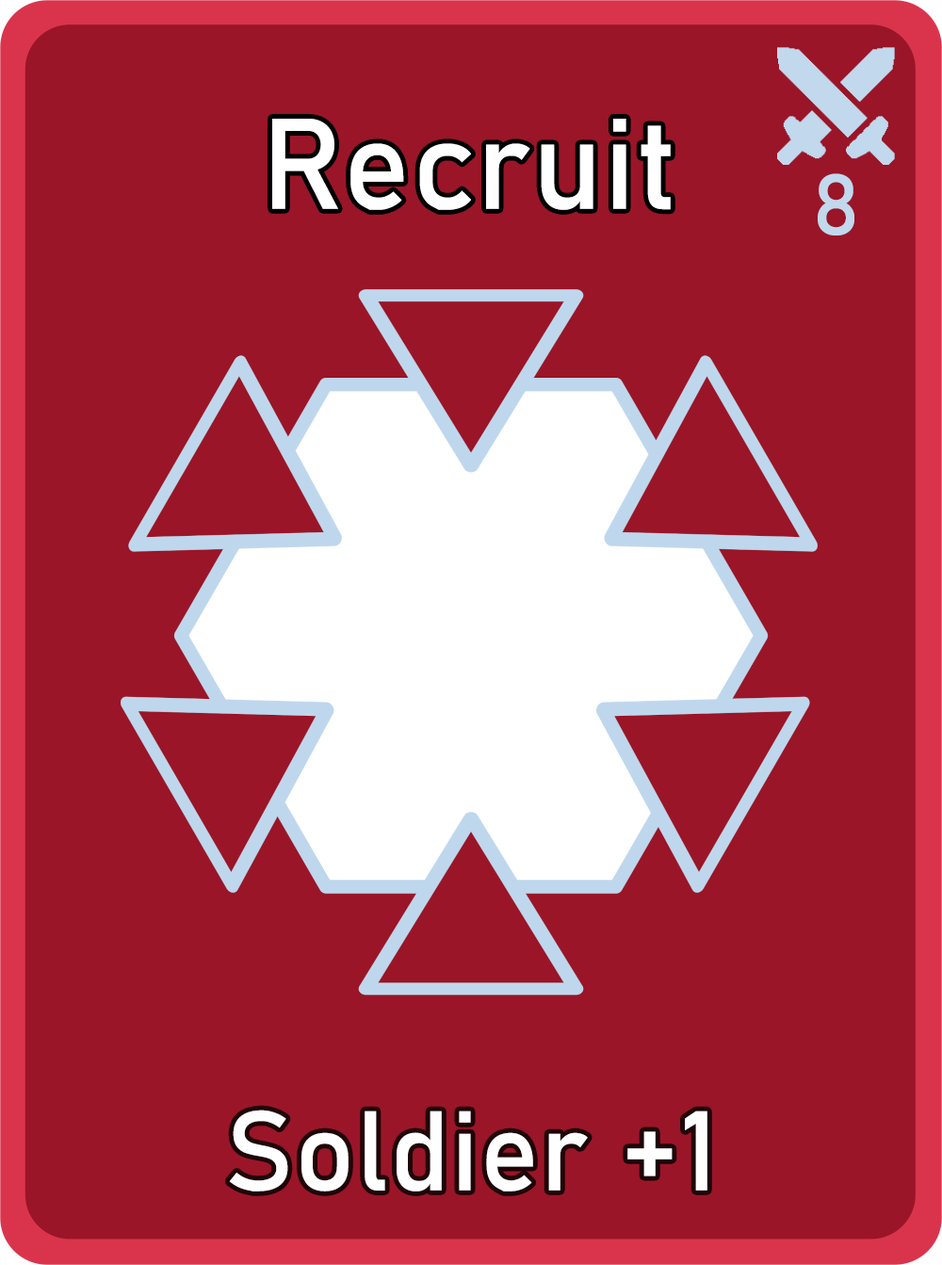
<style>
.page{position:relative;width:942px;height:1265px;background:#9a1527}
.page>*{position:absolute;margin:0}
.t1{font:126.7px "Bahnschrift";letter-spacing:0.01em;color:#ffffff}
.t2{font:85px "Bahnschrift";letter-spacing:0.01em;color:#c1d8ed}
.t3{font:111.3px "Bahnschrift";letter-spacing:0.01em;color:#ffffff}
</style>
<div class="page">
<p class="t1" style="left:272px;top:119px;width:399px;height:91px">Recruit</p>
<p class="t2" style="left:818px;top:173px;width:37px;height:63px">8</p>
<p class="t3" style="left:229px;top:1110px;width:479px;height:82px">Soldier +1</p>
</div>
